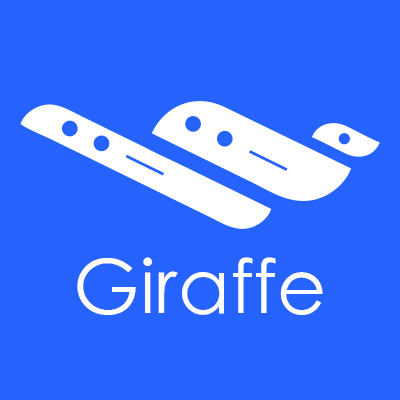
<style>
.page{position:relative;width:400px;height:400px;background:#2563fc}
.page>*{position:absolute;margin:0}
.t1{font:76.1px "STHeitiSC-Light";color:#fefefe}
</style>
<div class="page">
<p class="t1" style="left:77px;top:257px;width:246px;height:58px">Giraffe</p>
</div>
